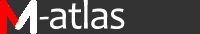
<style>
.page{position:relative;width:200px;height:34px;background:#333333}
.page>*{position:absolute;margin:0}
.t1{font:41.7px "Candara";letter-spacing:-0.03em;color:#fefeff}
</style>
<div class="page">
<p class="t1" style="left:39px;top:0px;width:86px;height:29px">-atlas</p>
</div>
